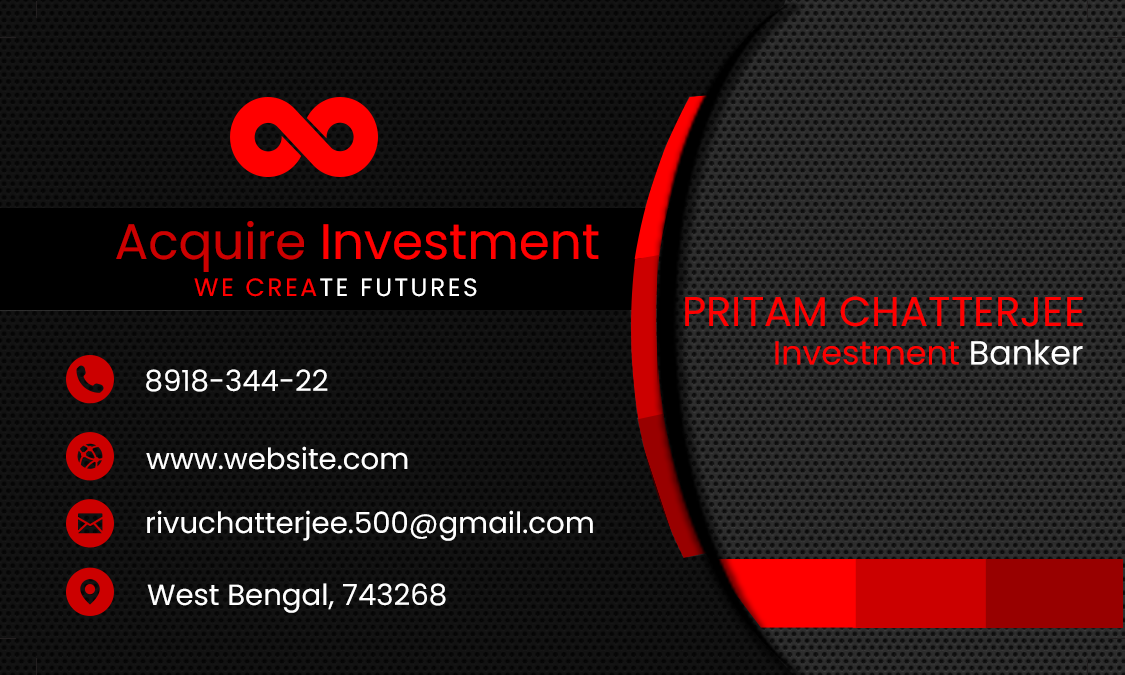
<style>
.page{position:relative;width:1125px;height:675px}
.page>*{position:absolute;margin:0}
.t1{font:50px "Poppins-Regular";color:#ff0000}
.t2{font:50px "Poppins-Regular";color:#cc0000}
.t3{font:25px "Poppins-Regular";letter-spacing:0.1em;color:#ffffff}
.t4{font:25px "Poppins-Regular";letter-spacing:0.1em;color:#ff0000}
.t5{font:41.7px "Poppins-Regular";color:#ff0000}
.t6{font:33.3px "Poppins-Regular";color:#ff0000}
.t7{font:33.3px "Poppins-Regular";color:#ffffff}
.t8{font:29.2px "Poppins-Regular";color:#ffffff}
</style>
<div class="page">
<p class="t1" style="left:116px;top:221px;width:483px;height:51px"><span class="t2">Acquire </span>Investment</p>
<p class="t3" style="left:194px;top:278px;width:283px;height:19px"><span class="t4">WE CREA</span>TE FUTURES</p>
<p class="t5" style="left:685px;top:296px;width:398px;height:31px">PRITAM CHATTERJEE</p>
<p class="t6" style="left:775px;top:339px;width:308px;height:26px">Investment <span class="t7">Banker</span></p>
<p class="t8" style="left:146px;top:369px;width:182px;height:23px">8918-344-22</p>
<p class="t8" style="left:146px;top:446px;width:262px;height:24px">www.website.com</p>
<p class="t8" style="left:147px;top:510px;width:446px;height:31px">rivuchatterjee.500@gmail.com</p>
<p class="t8" style="left:147px;top:583px;width:299px;height:30px">West Bengal, 743268</p>
</div>
